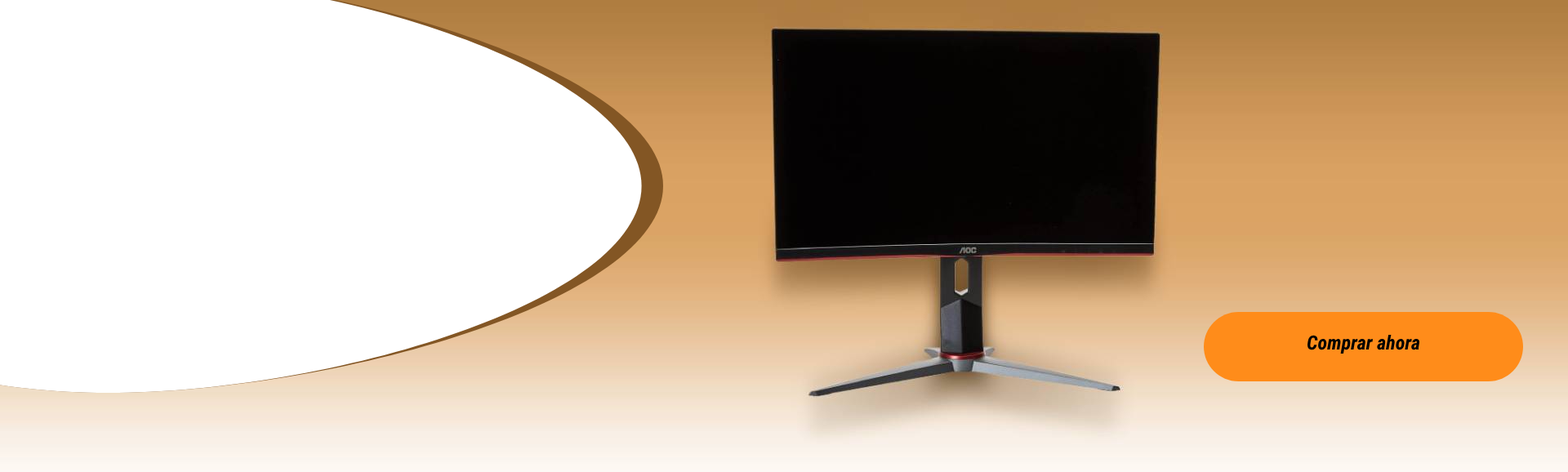
<style>
.page{position:relative;width:1568px;height:472px;background:#ffffff}
.page>*{position:absolute;margin:0}
.t1{font:19.6px "RobotoCondensed-BoldItalic";color:#000000}
</style>
<div class="page">
<p class="t1" style="left:1307px;top:335px;width:113px;height:19px">Comprar ahora</p>
</div>
